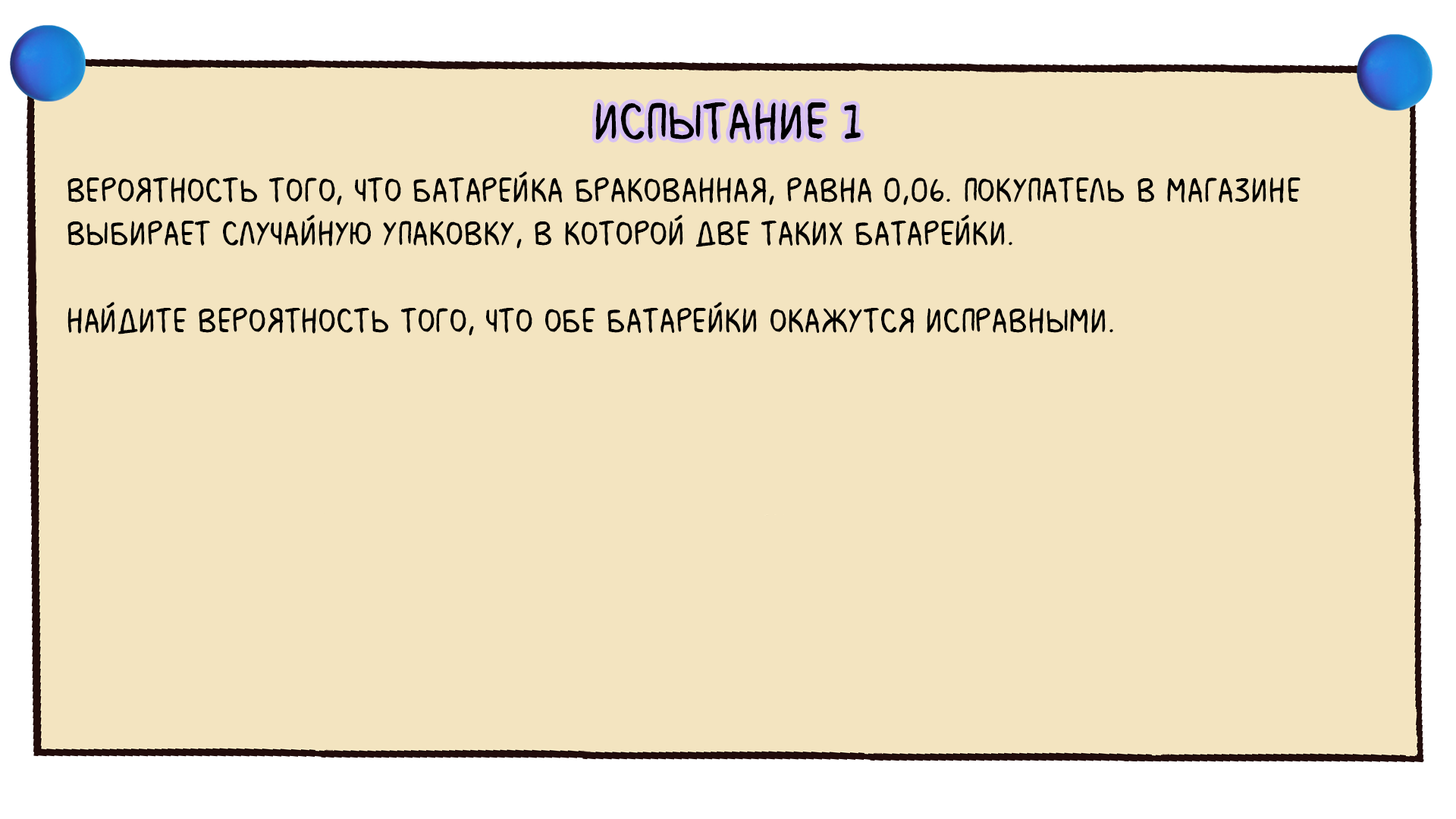
<style>
.page{position:relative;width:1456px;height:819px;background:#f3e4c0}
.page>*{position:absolute;margin:0}
.t1{font:54.6px "MilkMustacheBB";color:#000000}
.t2{font:36.4px "MilkMustacheBB";color:#000000}
</style>
<div class="page">
<p class="t1" style="left:595px;top:102px;width:266px;height:39px">испытание 1</p>
<p class="t2" style="left:67px;top:171px;width:1234px;height:165px">Вероятность того, что батарейка бракованная, равна 0,06. Покупатель в магазине <br>выбирает случайную упаковку, в которой две таких батарейки. <br><br>Найдите вероятность того, что обе батарейки окажутся исправными.</p>
</div>
